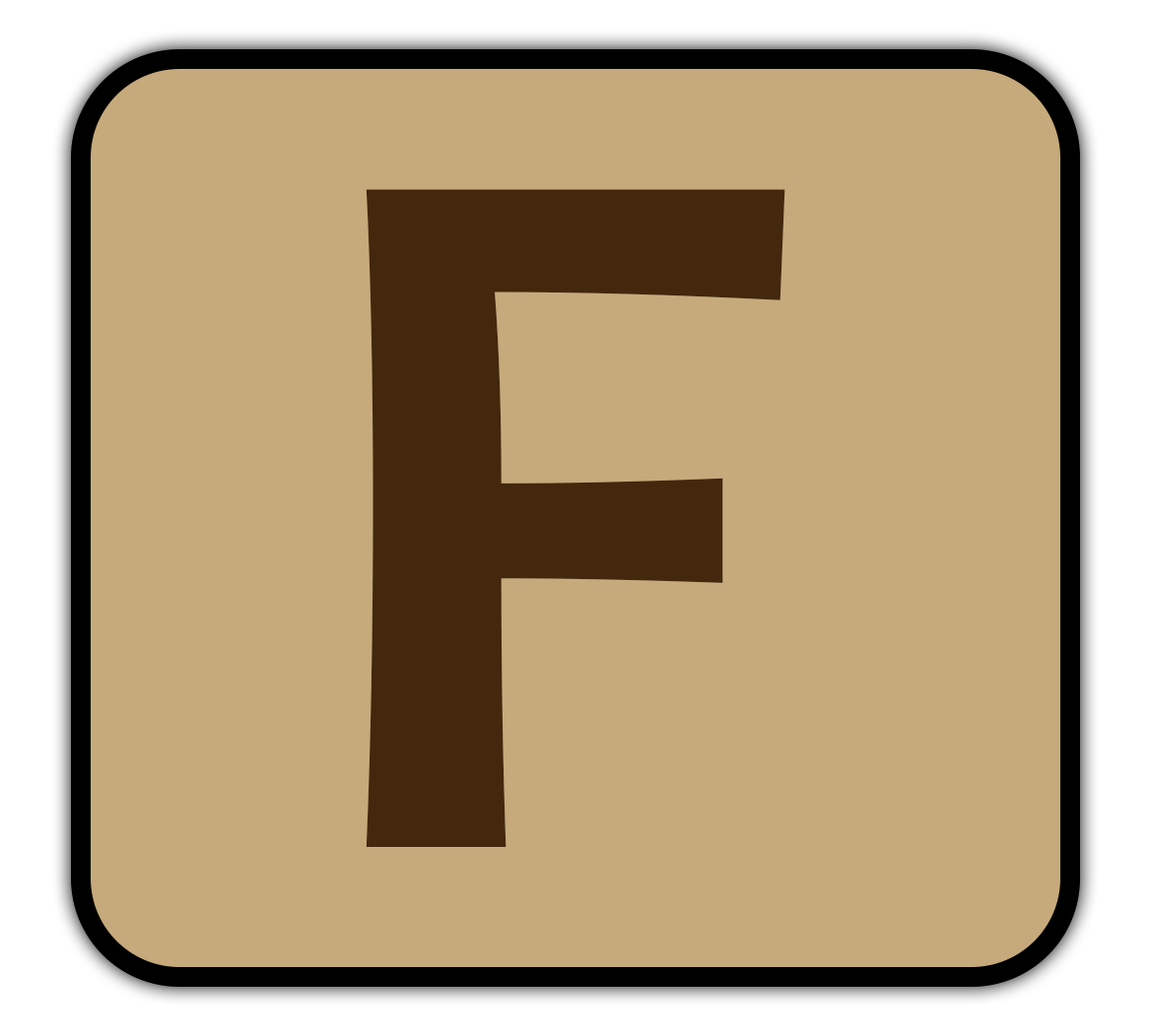
<style>
.page{position:relative;width:1151px;height:1036px;background:#c6aa7b}
.page>*{position:absolute;margin:0}
.t1{font:1034.4px "Candara-Bold";color:#43280d}
</style>
<div class="page">
<p class="t1" style="left:365px;top:189px;width:420px;height:658px">F</p>
</div>
